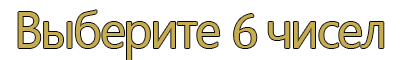
<style>
.page{position:relative;width:400px;height:60px;background:#ffffff}
.page>*{position:absolute;margin:0}
.t1{font:50px "SegoeUI";letter-spacing:-0.05em;color:#c8ad50}
.t2{font:50px "CambriaMath";letter-spacing:-0.05em;color:#c8ad50}
</style>
<div class="page">
<p class="t1" style="left:18px;top:10px;width:366px;height:50px">Выберите <span class="t2">6 </span>чисел</p>
</div>
